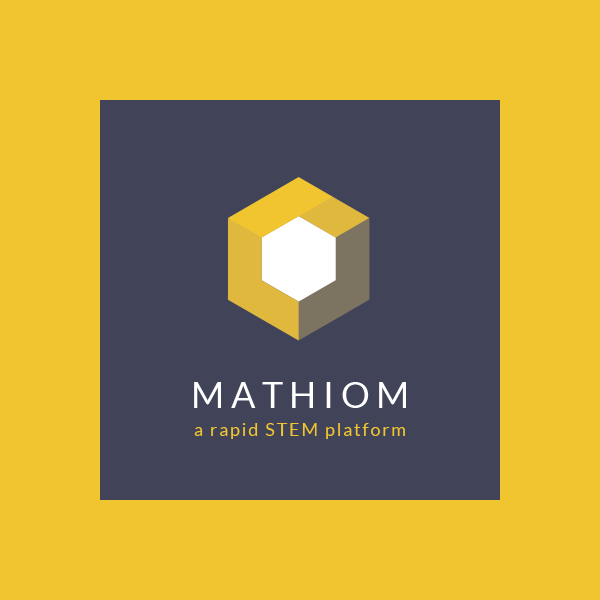
<style>
.page{position:relative;width:600px;height:600px;background:#f1c530}
.page>*{position:absolute;margin:0}
.t1{font:18px/28px "Lato-Regular";letter-spacing:0.1em;color:#f1c530}
.t2{font:36px/28px "Lato-Regular";letter-spacing:0.18em;color:#ffffff}
</style>
<div class="page">
<p class="t1" style="left:194px;top:382px;width:212px;height:57px;text-align:center"><span class="t2">MATHIOM<br></span>a rapid STEM platform</p>
</div>
